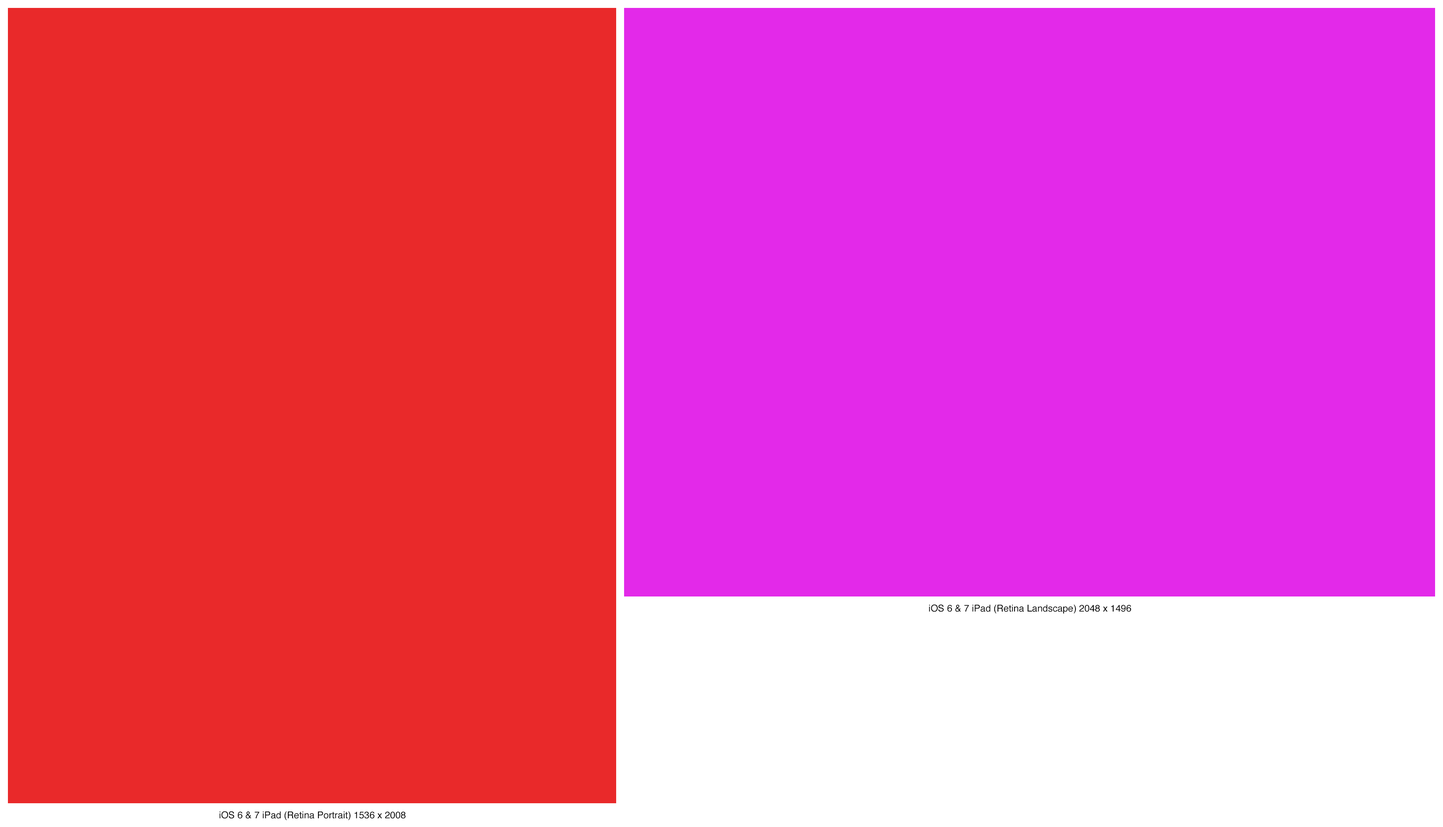
<style>
.page{position:relative;width:1443px;height:827px;background:#e9292a}
.page>*{position:absolute;margin:0}
.t1{font:9.5px "Helvetica";color:#000000}
</style>
<div class="page">
<p class="t1" style="left:929px;top:604px;width:202px;height:9px">iOS 6 &amp; 7 iPad (Retina Landscape) 2048 x 1496</p>
<p class="t1" style="left:219px;top:811px;width:186px;height:9px">iOS 6 &amp; 7 iPad (Retina Portrait) 1536 x 2008</p>
</div>
